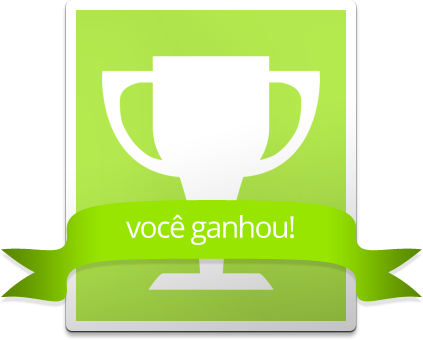
<style>
.page{position:relative;width:423px;height:340px;background:#ffffff}
.page>*{position:absolute;margin:0}
.t1{font:30px "OpenSans";letter-spacing:-0.05em;color:#ffffff}
</style>
<div class="page">
<p class="t1" style="left:126px;top:214px;width:168px;height:31px">você ganhou!</p>
</div>
